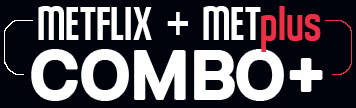
<style>
.page{position:relative;width:356px;height:108px;background:#00030c}
.page>*{position:absolute;margin:0}
.t1{font:49.8px "MaquiW00-Bold";color:#ffffff;scale:0.87 1}
.t2{font:49.8px "MaquiW00-Bold";color:#ec2f46;scale:0.87 1}
.t3{font:76.9px "Berka-Bold";color:#ffffff;scale:0.96 1}
</style>
<div class="page">
<p class="t1" style="left:38px;top:6px;width:114px;height:34px">METFLIX</p>
<p class="t2" style="left:203px;top:6px;width:118px;height:46px"><span class="t1">MET</span>plus</p>
<p class="t1" style="left:167px;top:12px;width:21px;height:23px">+</p>
<p class="t3" style="left:32px;top:50px;width:290px;height:50px">COMBO+</p>
</div>
